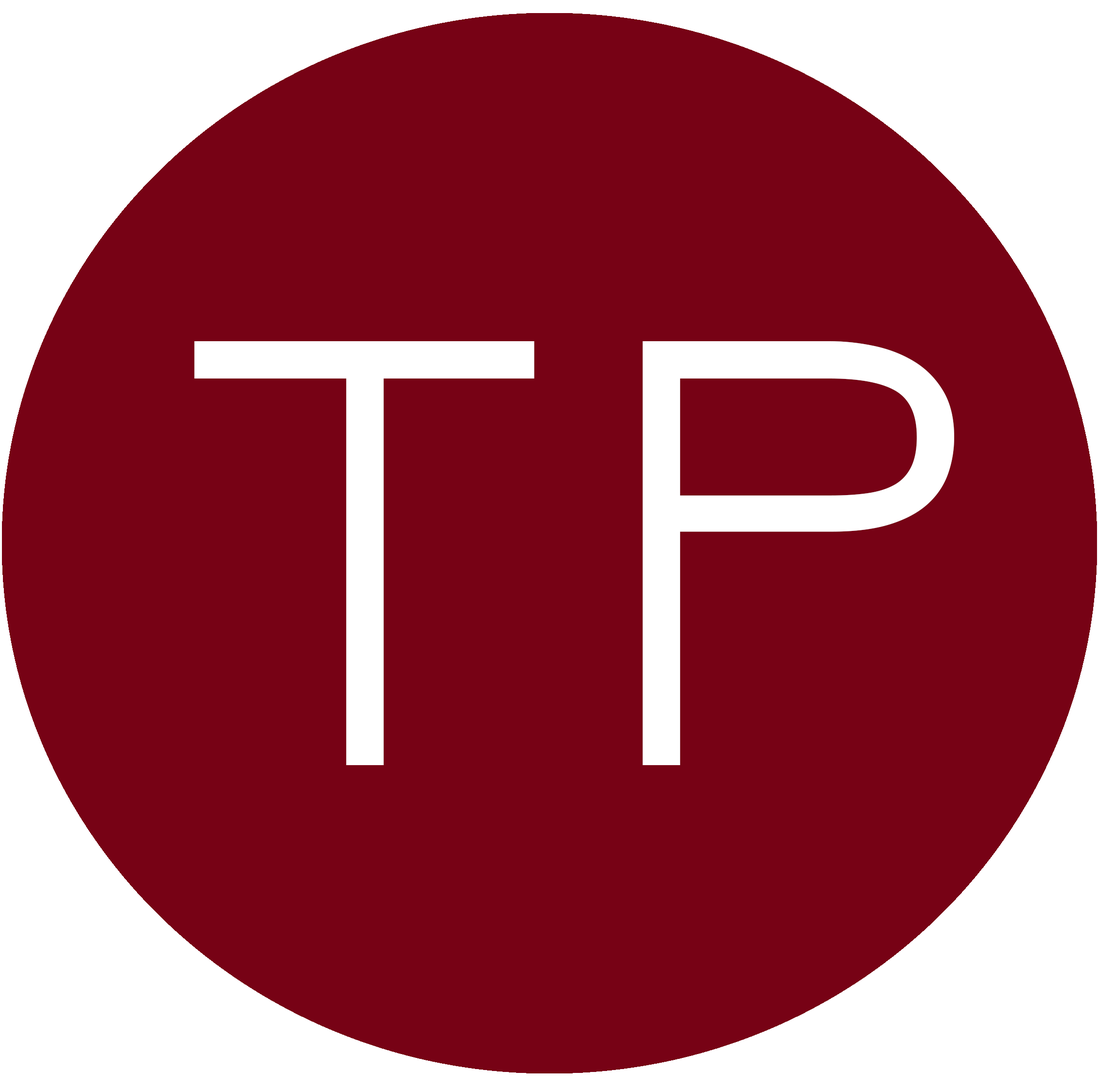
<style>
.page{position:relative;width:1098px;height:1086px;background:#770215}
.page>*{position:absolute;margin:0}
.t1{font:643.2px "AboveDEMO-Regular";color:#ffffff}
</style>
<div class="page">
<p class="t1" style="left:194px;top:341px;width:760px;height:424px">Tp</p>
</div>
